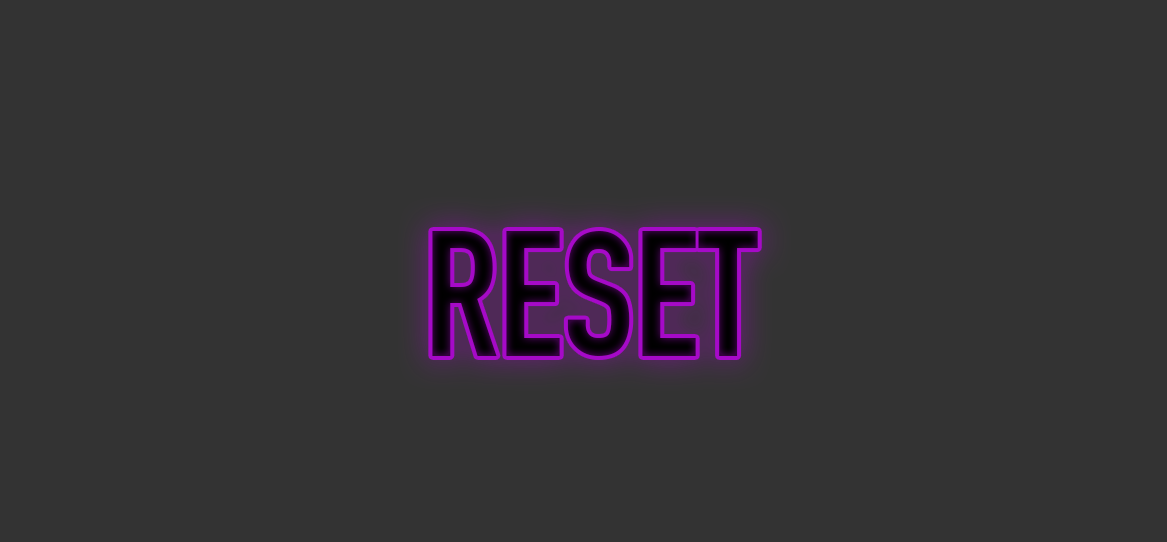
<style>
.page{position:relative;width:1167px;height:542px;background:#333333}
.page>*{position:absolute;margin:0}
.t1{font:175.5px "DINEngschrift";color:#0f0112}
</style>
<div class="page">
<p class="t1" style="left:432px;top:231px;width:326px;height:125px">RESET</p>
</div>
